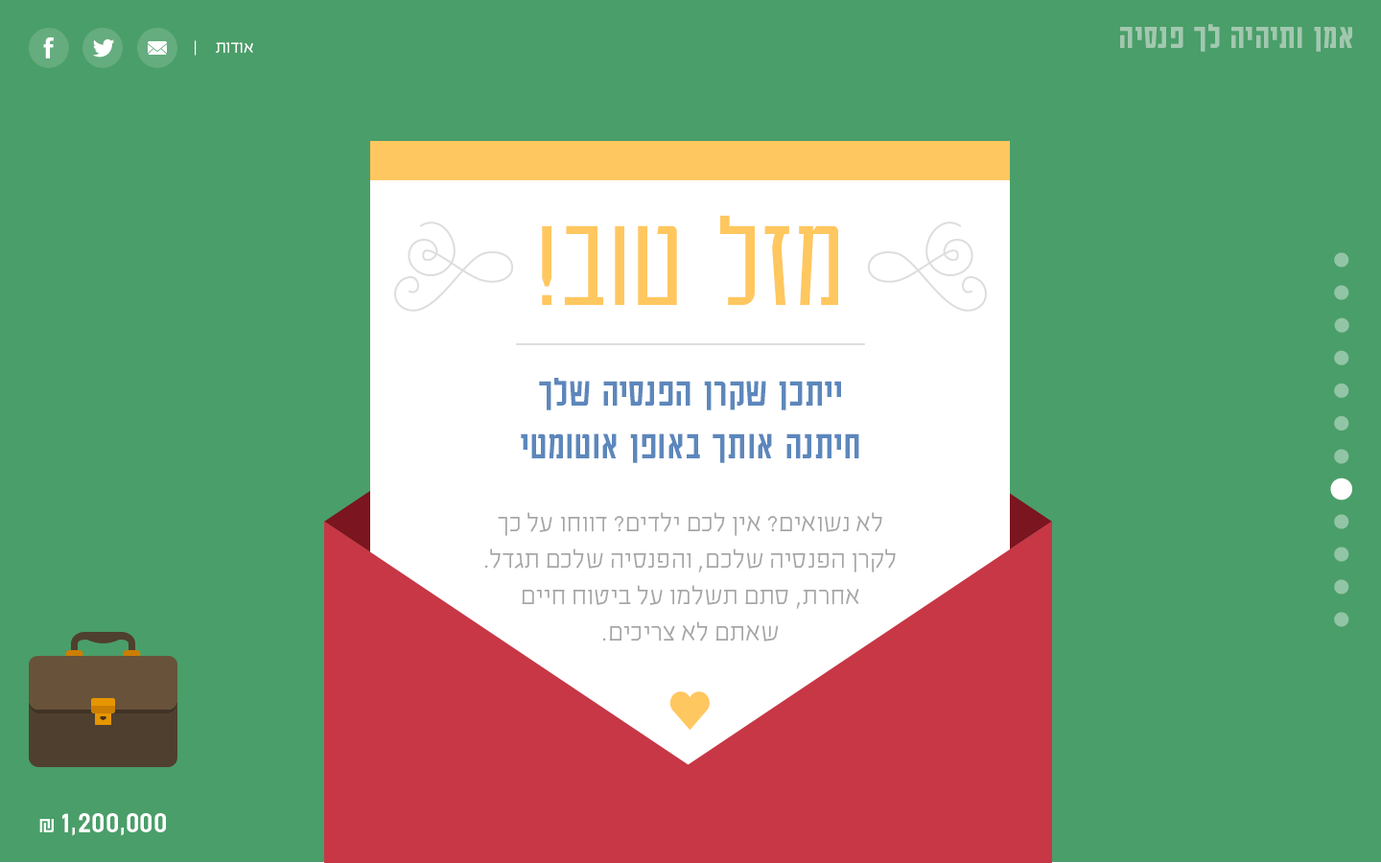
<style>
.page{position:relative;width:1381px;height:863px;background:#4a9e69}
.page>*{position:absolute;margin:0}
.t1{font:37.8px "AdumaFOT-Medium";color:#a2c8af}
.t2{font:19.2px "EzerBlock_OE-Light";color:#ffffff}
.t3{font:142.4px "AdumaFOT-Light";color:#ffc75f}
.t4{font:28.8px/36.5px "EzerBlock_OE-Light";color:#a5a5a5}
.t5{font:44.1px "AdumaFOT-Regular";color:#5d87bc}
.t6{font:33.6px "AdumaFOT-Regular";color:#ffffff}
.t7{font:24px "AdumaFOT-Regular";color:#ffffff}
</style>
<div class="page">
<p class="t1" style="left:1120px;top:24px;width:232px;height:28px">אמן ותיהיה לך פנסיה</p>
<p class="t2" style="left:195px;top:40px;width:58px;height:16px">אודות     |</p>
<p class="t3" style="left:542px;top:215px;width:296px;height:91px">מזל טוב!</p>
<p class="t4" style="left:485px;top:378px;width:411px;height:264px;text-align:center"><span class="t5">ייתכן שקרן הפנסיה שלך<br>חיתנה אותך באופן אוטומטי<br><br></span>לא נשואים? אין לכם ילדים? דווחו על כך לקרן הפנסיה שלכם, והפנסיה שלכם תגדל. אחרת, סתם תשלמו על ביטוח חיים<br>שאתם לא צריכים.</p>
<p class="t6" style="left:39px;top:813px;width:127px;height:23px">1,200,000 <span class="t7">₪</span></p>
</div>
